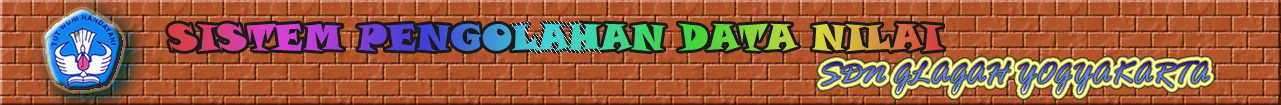
<style>
.page{position:relative;width:1281px;height:105px}
.page>*{position:absolute;margin:0}
.t1{font:36px "SnapITC-Regular"}
.t2{font:32px "RageItalic"}
</style>
<div class="page">
<p class="t1" style="left:168px;top:23px;width:776px;height:29px">SISTEM PENGOLAHAN DATA NILAI</p>
<p class="t2" style="left:821px;top:61px;width:389px;height:34px">SDN GLAGAH YOGYAKARTA</p>
</div>
